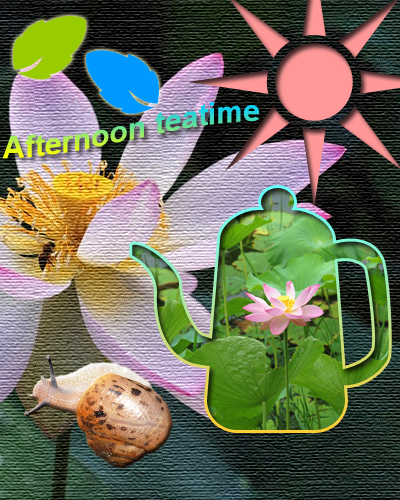
<style>
.page{position:relative;width:400px;height:500px}
.page>*{position:absolute;margin:0}
.t1{font:30px "Arial-BoldMT"}
</style>
<div class="page">
<p class="t1" style="left:3px;top:102px;width:257px;height:57px">Afternoon teatime</p>
</div>
